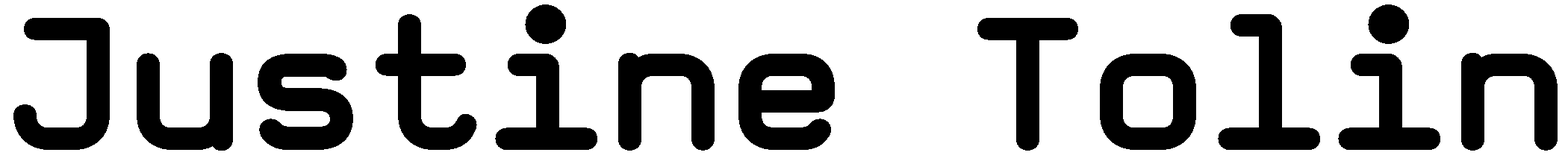
<style>
.page{position:relative;width:1568px;height:167px;background:#ffffff}
.page>*{position:absolute;margin:0}
.t1{font:222.8px "MagdaCleanMono-Bold";letter-spacing:-0.025em;color:#000000;scale:1.03 1}
</style>
<div class="page">
<p class="t1" style="left:13px;top:4px;width:1545px;height:147px">Justine Tolin</p>
</div>
